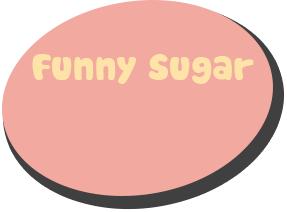
<style>
.page{position:relative;width:287px;height:212px;background:#f1a9a0}
.page>*{position:absolute;margin:0}
.t1{font:36px "Cookies";color:#fde3a7}
</style>
<div class="page">
<p class="t1" style="left:32px;top:54px;width:222px;height:30px">Funny Sugar</p>
</div>
